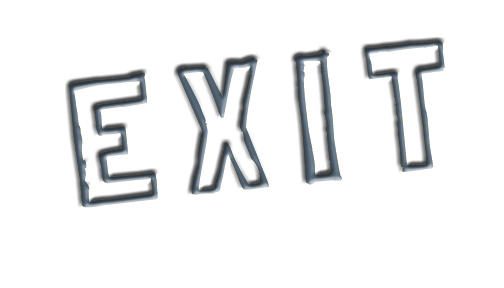
<style>
.page{position:relative;width:504px;height:288px;background:#ffffff}
.page>*{position:absolute;margin:0}
.t1{font:178.1px "LondrinaSketch-Regular";letter-spacing:0.15em;font-weight:bold}
</style>
<div class="page">
<p class="t1" style="left:69px;top:41px;width:376px;height:167px;rotate:-6deg">EXIT</p>
<p class="t1" style="left:69px;top:41px;width:376px;height:167px;rotate:-6deg">EXIT</p>
</div>
